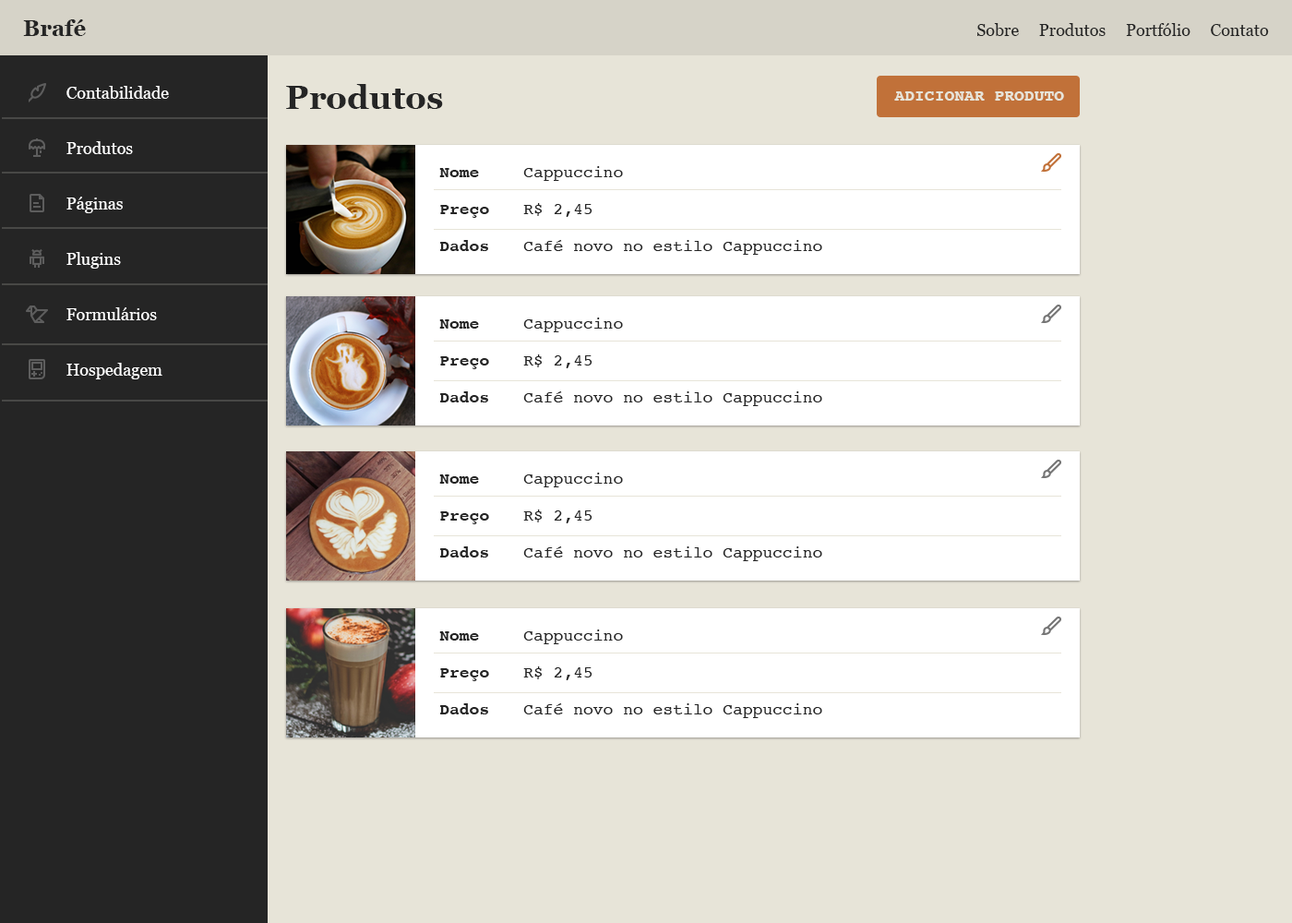
<style>
.page{position:relative;width:1292px;height:923px;background:#e7e4d8}
.page>*{position:absolute;margin:0}
.t1{font:22.1px "Georgia-Bold";color:#252525}
.t2{font:16.6px "Georgia";color:#252525}
.t3{font:16.6px/55.4px "Georgia";color:#ffffff}
.t4{font:33.2px "Georgia-Bold";color:#252525}
.t5{font:16.6px "Courier-Bold";color:#e7e4d8;text-transform:uppercase}
.t6{font:16.6px/36.9px "Courier-Bold";color:#252525}
.t7{font:16.6px/36.9px "Courier";color:#252525}
</style>
<div class="page">
<p class="t1" style="left:23px;top:19px;width:63px;height:17px">Brafé</p>
<p class="t2" style="left:977px;top:23px;width:292px;height:13px">Sobre     Produtos     Portfólio     Contato</p>
<p class="t3" style="left:66px;top:86px;width:103px;height:293px">Contabilidade<br>Produtos<br>Páginas<br>Plugins<br>Formulários<br>Hospedagem</p>
<p class="t4" style="left:286px;top:84px;width:157px;height:25px">Produtos</p>
<p class="t5" style="left:894px;top:91px;width:170px;height:10px">Adicionar PRODUTO</p>
<p class="t6" style="left:439px;top:168px;width:50px;height:83px">Nome<br>Preço<br>Dados</p>
<p class="t7" style="left:523px;top:166px;width:299px;height:89px">Cappuccino<br>R$ 2,45<br>Café novo no estilo Cappuccino</p>
</div>
